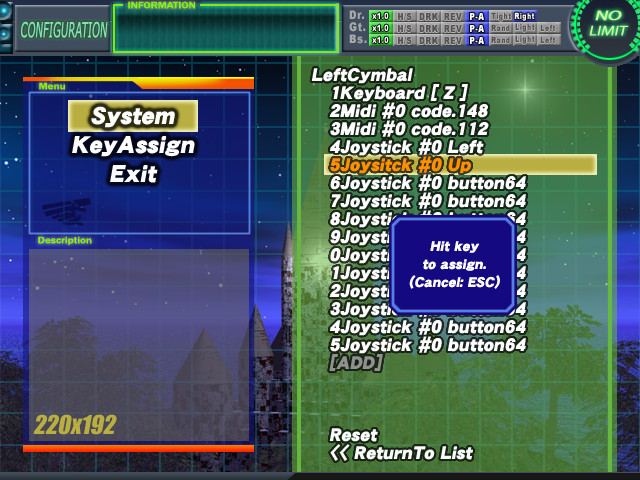
<style>
.page{position:relative;width:640px;height:480px}
.page>*{position:absolute;margin:0}
.t1{font:9.8px "FranklinGothic-Medium";color:#84f400;scale:1.14 1}
.t2{font:12px "Arial-Black";letter-spacing:0.05em;color:#a7a8a7;scale:0.83 1}
.t3{font:14px/15px "Myriad-Roman";color:#d0f09a;font-style:italic;scale:1.2 1}
.t4{font:14px/15px "Myriad-Roman";letter-spacing:-0.05em;color:#d0f09a;font-weight:bold;font-style:italic;scale:1.4 1}
.t5{font:21px "MSReferenceSansSerif";color:#82e2b2;font-style:italic;scale:0.48 1}
.t6{font:18px/18px "DFGothic-UB-WINP-RKSJ-H";color:#fcfdfc;font-style:italic}
.t7{font:18px/18px "DFGothic-UB-WINP-RKSJ-H";color:#fe9001;font-style:italic}
.t8{font:18px/18px "DFGothic-UB-WINP-RKSJ-H";color:#8f918f;font-style:italic}
.t9{font:18px/18px "DFGothic-UB-WINP-RKSJ-H";color:#f8fcf8;font-style:italic}
.t10{font:24px "DFGothic-UB-WINP-RKSJ-H";color:#fdfdfd;font-style:italic}
.t11{font:14px/18px "DFGothic-UB-WINP-RKSJ-H";color:#fcfdfc;font-style:italic}
.t12{font:24px "Impact";color:#b8ae41;font-style:italic}
</style>
<div class="page">
<p class="t1" style="left:128px;top:1px;width:67px;height:8px">INFORMATION</p>
<p class="t2" style="left:349px;top:10px;width:18px;height:34px">Dr.<br>Gt.<br>Bs.</p>
<p class="t3" style="left:589px;top:10px;width:40px;height:26px;text-align:center"><span class="t4">NO<br></span>LIMIT</p>
<p class="t5" style="left:21px;top:21px;width:87px;height:17px">CONFIGURATION</p>
<p class="t6" style="left:311px;top:68px;width:215px;height:393px">LeftCymbal<br>   1Keyboard [ Z ]<br>   2Midi #0 code.148<br>   3Midi #0 code.112<br>   4Joystick #0 Left<br>   <span class="t7">5Joysitck #0 Up<br></span>   6Joystick #0 button64<br>   7Joystick #0 button64<br>   8Joystick #0 button64<br>   9Joystick #0 button64<br>   0Joystick #0 button64<br>   1Joystick #0 button64<br>   2Joystick #0 button64<br>   3Joystick #0 button64<br>   4Joystick #0 button64<br>   5Joystick #0 button64<br>  <span class="t8"> [ADD]<br><br><br><br></span><span class="t9">   Reset<br>   &lt;&lt; ReturnTo List</span></p>
<p class="t1" style="left:39px;top:82px;width:26px;height:8px">Menu</p>
<p class="t10" style="left:72px;top:106px;width:123px;height:77px;text-align:center">System<br>KeyAssign<br>Exit</p>
<p class="t1" style="left:38px;top:236px;width:54px;height:9px">Description</p>
<p class="t11" style="left:409px;top:241px;width:91px;height:48px;text-align:center">Hit key<br>to assign.<br>(Cancel: ESC)</p>
<p class="t12" style="left:33px;top:414px;width:84px;height:21px">220x192</p>
</div>
